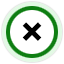
<style>
.page{position:relative;width:64px;height:64px;background:#ffffff}
.page>*{position:absolute;margin:0}
.t1{font:40px "Arial-BoldMT";color:#000000}
</style>
<div class="page">
<p class="t1" style="left:22px;top:22px;width:20px;height:19px">×</p>
</div>
